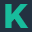
<style>
.page{position:relative;width:32px;height:32px;background:#233140}
.page>*{position:absolute;margin:0}
.t1{font:34px "Montserrat-Bold";color:#18bc9c}
</style>
<div class="page">
<p class="t1" style="left:5px;top:4px;width:24px;height:24px">K</p>
</div>
